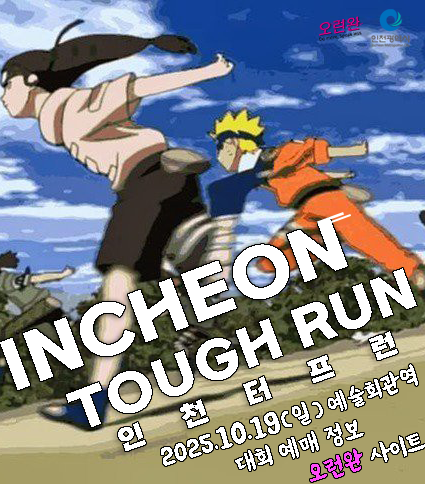
<style>
.page{position:relative;width:425px;height:484px}
.page>*{position:absolute;margin:0}
.t1{font:64.4px "SBAggroB";letter-spacing:0.02em;color:#ffffff}
.t2{font:50px "SBAggroB";letter-spacing:0.02em;color:#ffffff}
.t3{font:27px "SBAggroB";letter-spacing:0.02em;color:#ffffff}
.t4{font:24.9px "establishRoomNo703";letter-spacing:0.02em;color:#ffffff}
.t5{font:29.8px "establishRoomNo703";letter-spacing:0.02em;color:#ffffff}
.t6{font:24.9px "establishRoomNo703";letter-spacing:0.02em;color:#ff4bf9}
</style>
<div class="page">
<p class="t1" style="left:0px;top:218px;width:348px;height:172px;rotate:-21deg">INCHEON</p>
<p class="t2" style="left:66px;top:268px;width:351px;height:159px;rotate:-21deg">TOUGH RUN</p>
<p class="t3" style="left:118px;top:331px;width:280px;height:120px;rotate:-20deg">인     천     터     프     런</p>
<p class="t4" style="left:328px;top:364px;width:90px;height:47px;rotate:-19deg">예술회관역</p>
<p class="t4" style="left:161px;top:402px;width:162px;height:64px;rotate:-17deg">2025.<span class="t5">10.19</span>(일)</p>
<p class="t4" style="left:235px;top:420px;width:190px;height:62px;rotate:-17deg">대회 예매 정보<br>            <span class="t6">오런완</span> 사이트</p>
</div>
